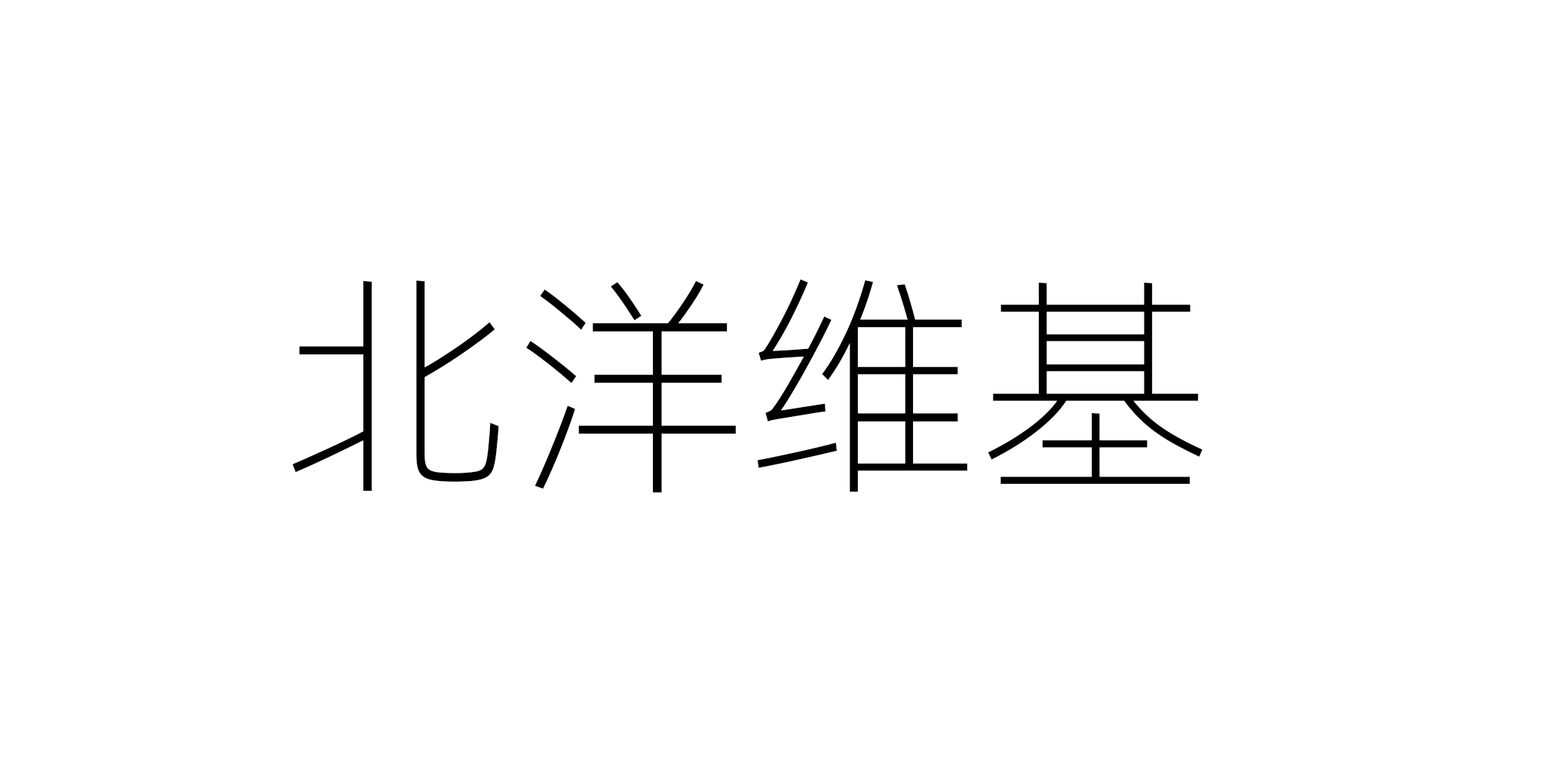
<style>
.page{position:relative;width:1544px;height:772px;background:#ffffff}
.page>*{position:absolute;margin:0}
.t1{font:236.5px "Alibaba-PuHuiTi-L";color:#000000}
</style>
<div class="page">
<p class="t1" style="left:293px;top:279px;width:910px;height:214px">北洋维基</p>
</div>
